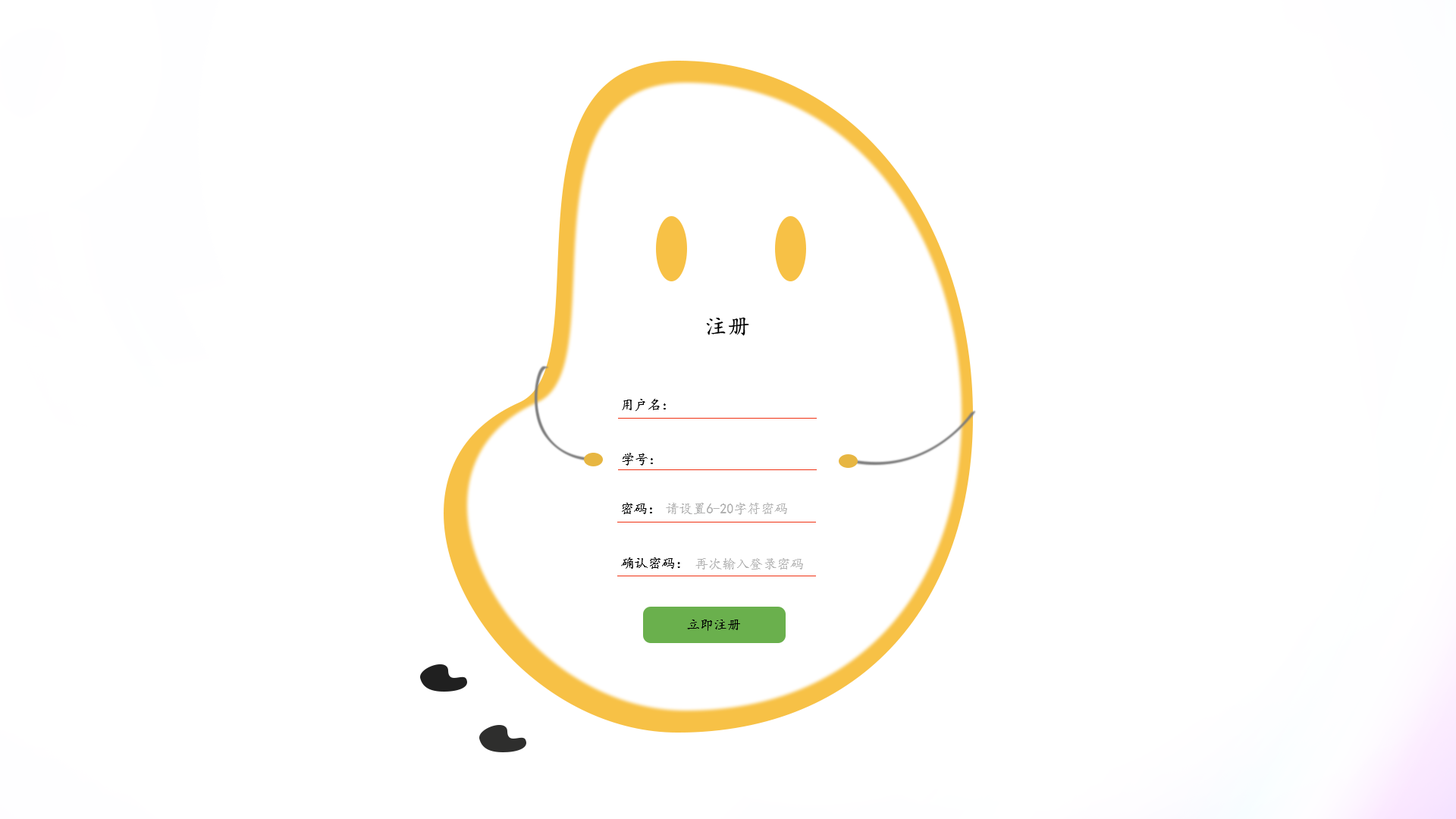
<style>
.page{position:relative;width:1456px;height:819px;background:#ffffff}
.page>*{position:absolute;margin:0}
.t1{font:22.7px "KaiTi";color:#000000}
.t2{font:13.6px "KaiTi";color:#000000}
.t3{font:13.6px "KaiTi";color:#b2b2b2}
</style>
<div class="page">
<p class="t1" style="left:706px;top:317px;width:43px;height:19px">注册</p>
<p class="t2" style="left:622px;top:399px;width:44px;height:12px">用户名：</p>
<p class="t2" style="left:622px;top:453px;width:31px;height:13px">学号：</p>
<p class="t2" style="left:622px;top:503px;width:30px;height:11px">密码：</p>
<p class="t3" style="left:666px;top:502px;width:121px;height:13px">请设置6-20字符密码</p>
<p class="t2" style="left:621px;top:557px;width:59px;height:12px">确认密码：</p>
<p class="t3" style="left:695px;top:558px;width:108px;height:12px">再次输入登录密码</p>
<p class="t2" style="left:687px;top:620px;width:53px;height:11px">立即注册</p>
</div>
